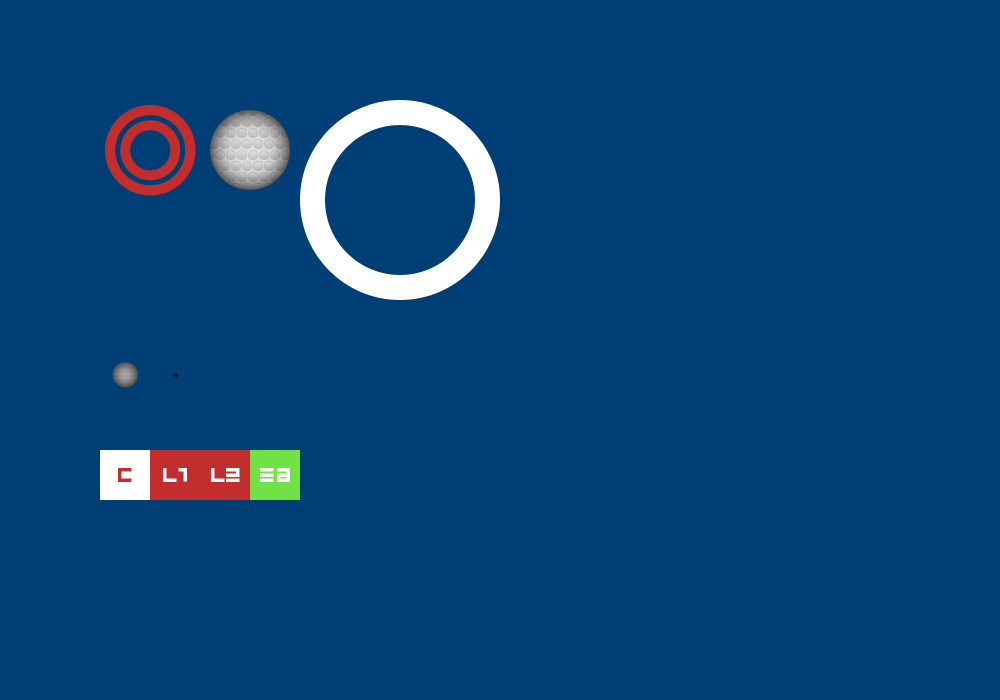
<style>
.page{position:relative;width:1000px;height:700px;background:#003f75}
.page>*{position:absolute;margin:0}
.t1{font:30px "BINBold-Regular";color:#c22e2e;text-transform:uppercase}
.t2{font:30px "BINBold-Regular";color:#ffffff;text-transform:uppercase}
</style>
<div class="page">
<p class="t1" style="left:118px;top:468px;width:14px;height:14px">C</p>
<p class="t2" style="left:163px;top:468px;width:24px;height:14px">l1</p>
<p class="t2" style="left:211px;top:468px;width:29px;height:14px">l2</p>
<p class="t2" style="left:260px;top:468px;width:30px;height:14px">ea</p>
</div>
